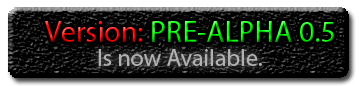
<style>
.page{position:relative;width:361px;height:86px;background:#000000}
.page>*{position:absolute;margin:0}
.t1{font:30px "MyriadPro-Regular"}
.t2{font:24px "MyriadPro-Regular";color:#b2b2b2}
</style>
<div class="page">
<p class="t1" style="left:45px;top:21px;width:289px;height:21px">Version: PRE-ALPHA 0.5</p>
<p class="t2" style="left:98px;top:49px;width:164px;height:17px">Is now Available.</p>
</div>
